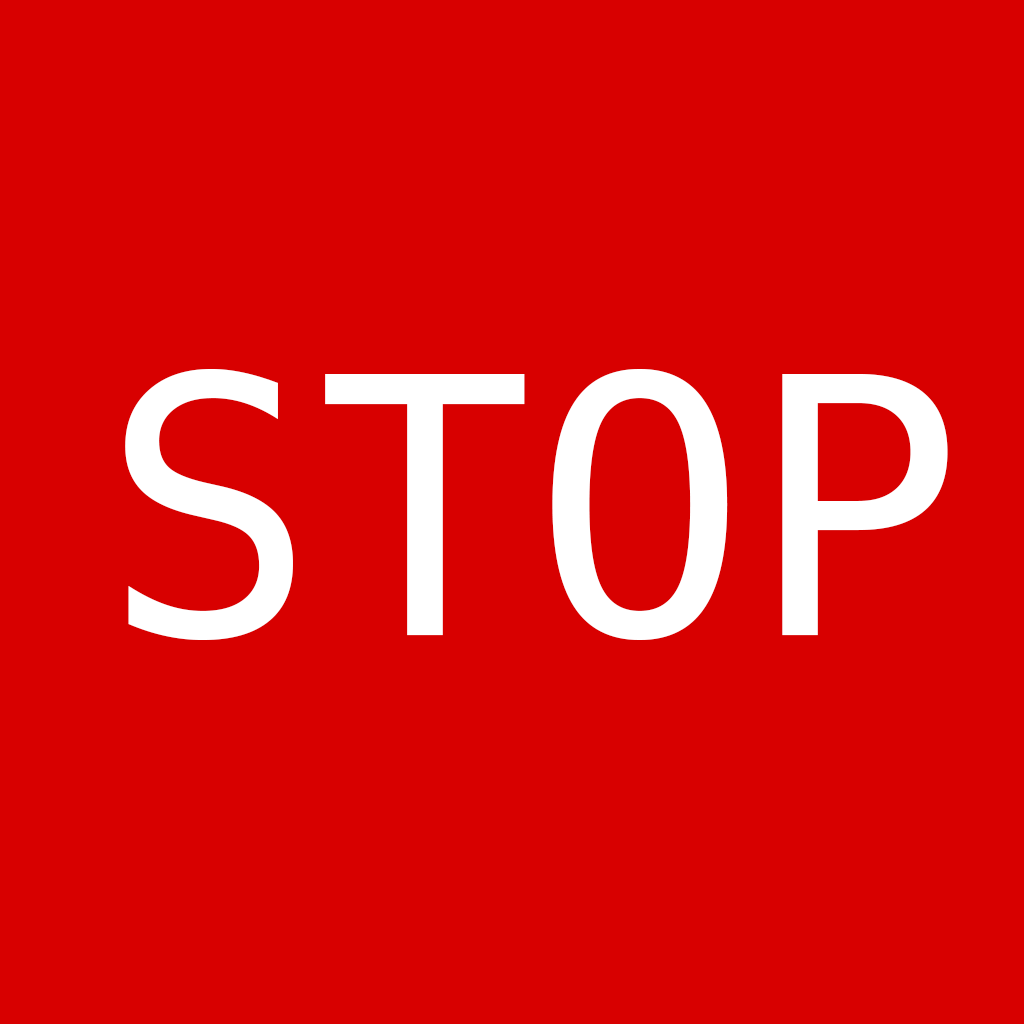
<style>
.page{position:relative;width:1024px;height:1024px;background:#d80000}
.page>*{position:absolute;margin:0}
.t1{font:358.3px "Menlo-Regular";color:#ffffff}
</style>
<div class="page">
<p class="t1" style="left:125px;top:369px;width:823px;height:271px">STOP</p>
</div>
